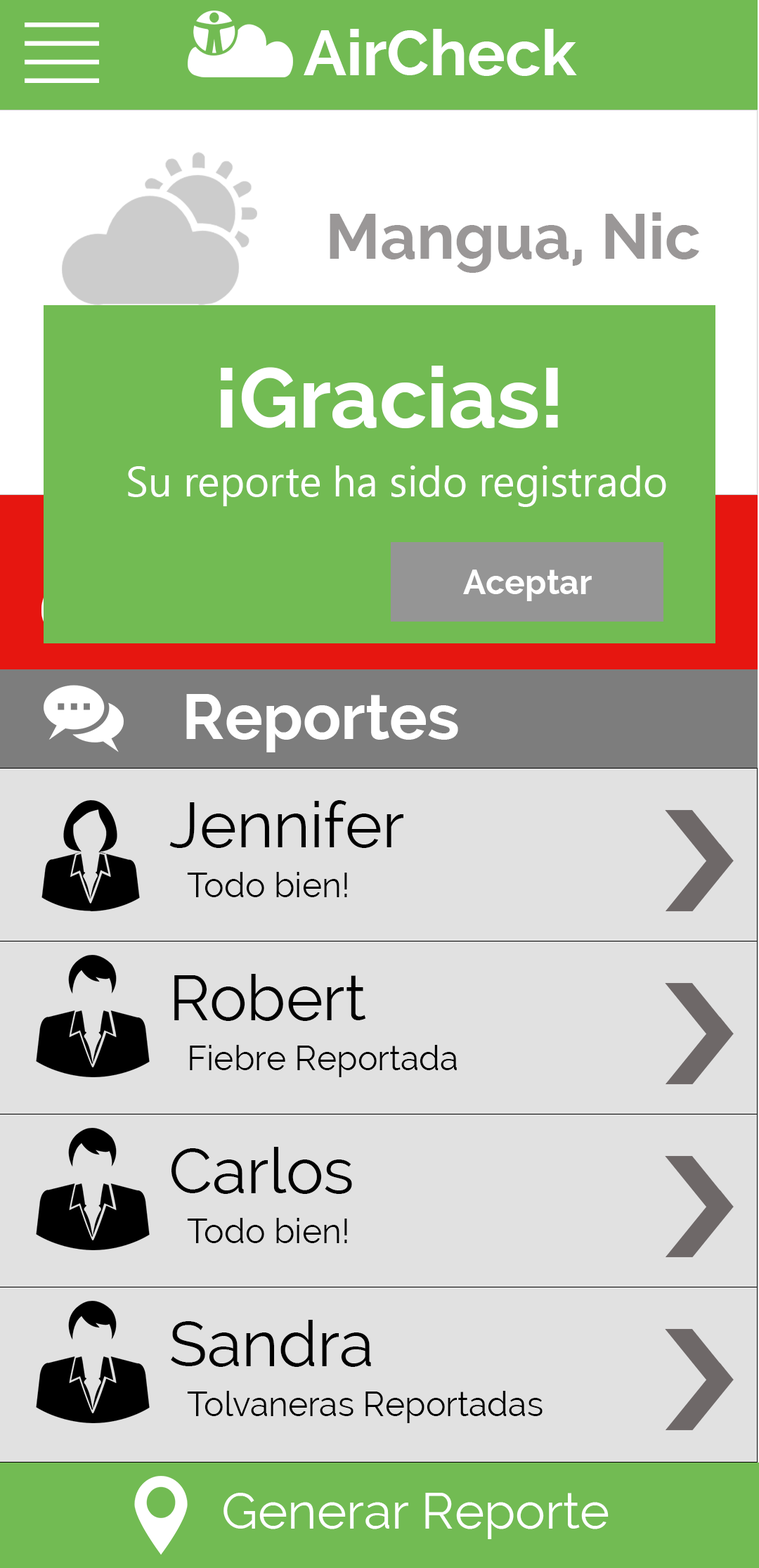
<style>
.page{position:relative;width:759px;height:1568px;background:#e1e1e1}
.page>*{position:absolute;margin:0}
.t1{font:63.3px "Raleway-Bold";color:#ffffff}
.t2{font:63.3px "Raleway-Bold";color:#9a9797}
.t3{font:84.4px "Raleway-Bold";color:#ffffff}
.t4{font:42.2px "NirmalaUI";color:#ffffff}
.t5{font:33.8px "Raleway-Bold";color:#ffffff}
.t6{font:63.3px "Raleway";color:#000000}
.t7{font:33.8px "Raleway";color:#000000}
.t8{font:50.6px "Raleway";color:#ffffff}
</style>
<div class="page">
<p class="t1" style="left:304px;top:29px;width:273px;height:47px">AirCheck</p>
<p class="t2" style="left:330px;top:212px;width:370px;height:61px">Mangua, Nic</p>
<p class="t3" style="left:221px;top:366px;width:337px;height:62px">¡Gracias!</p>
<p class="t4" style="left:128px;top:465px;width:539px;height:42px">Su reporte ha sido registrado</p>
<p class="t5" style="left:463px;top:570px;width:129px;height:31px">Aceptar</p>
<p class="t1" style="left:186px;top:694px;width:272px;height:58px">Reportes</p>
<p class="t6" style="left:169px;top:800px;width:235px;height:48px">Jennifer</p>
<p class="t7" style="left:187px;top:872px;width:160px;height:25px">Todo bien!</p>
<p class="t6" style="left:174px;top:974px;width:192px;height:47px">Robert</p>
<p class="t7" style="left:190px;top:1045px;width:267px;height:32px">Fiebre Reportada</p>
<p class="t6" style="left:172px;top:1147px;width:180px;height:47px">Carlos</p>
<p class="t7" style="left:187px;top:1218px;width:160px;height:25px">Todo bien!</p>
<p class="t6" style="left:171px;top:1320px;width:200px;height:47px">Sandra</p>
<p class="t7" style="left:187px;top:1391px;width:356px;height:32px">Tolvaneras Reportadas</p>
<p class="t8" style="left:224px;top:1493px;width:385px;height:46px">Generar Reporte</p>
</div>
